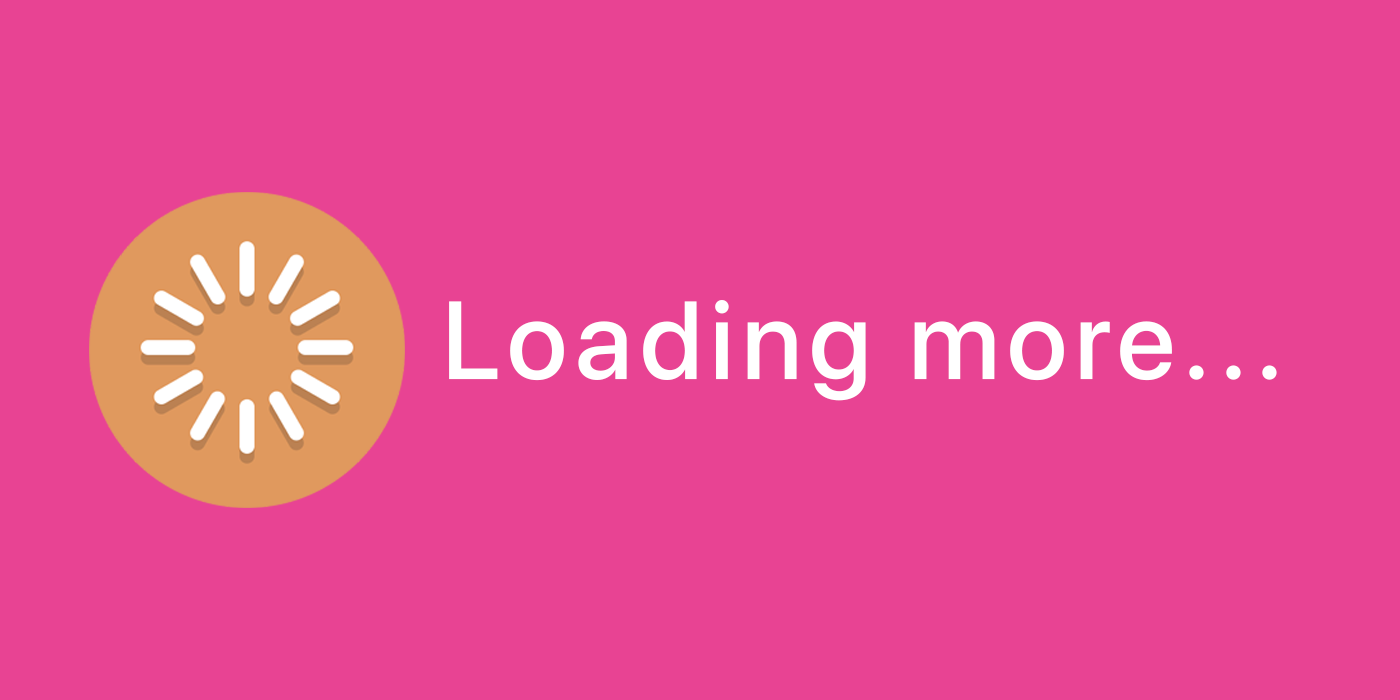
<style>
.page{position:relative;width:1400px;height:700px;background:#e84393}
.page>*{position:absolute;margin:0}
.t1{font:110px "SFProDisplay-Medium";letter-spacing:0.07em;color:#ffffff}
</style>
<div class="page">
<p class="t1" style="left:449px;top:300px;width:828px;height:101px">Loading more...</p>
</div>
